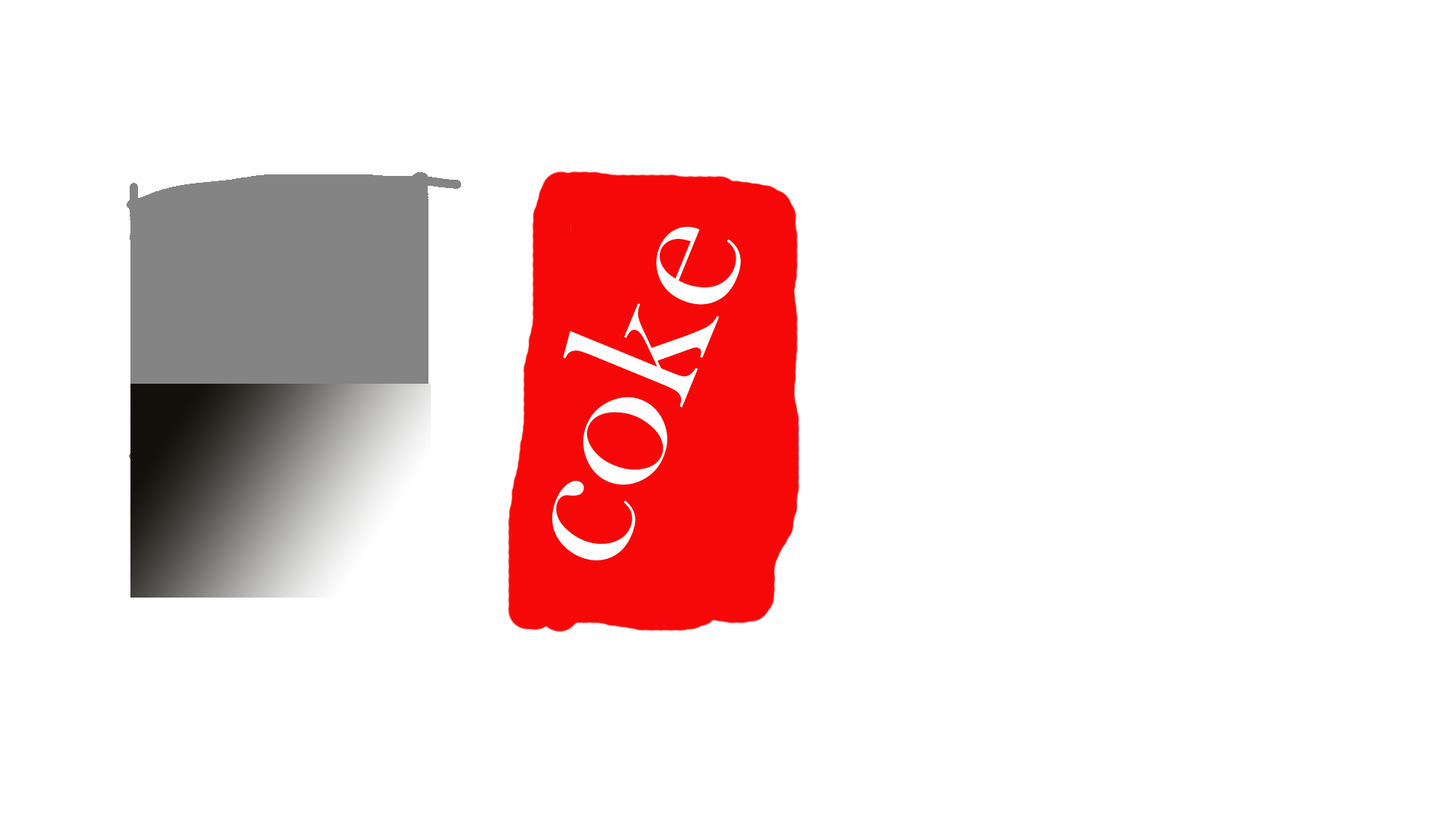
<style>
.page{position:relative;width:1456px;height:819px;background:#ffffff}
.page>*{position:absolute;margin:0}
.t1{font:192.6px "BaskOldFace";color:#ffffff}
</style>
<div class="page">
<p class="t1" style="left:552px;top:227px;width:189px;height:333px;rotate:-68deg">coke</p>
</div>
